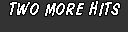
<style>
.page{position:relative;width:128px;height:32px;background:#333333}
.page>*{position:absolute;margin:0}
.t1{font:18px "DomDiagonalBT-Regular";letter-spacing:0.025em;color:#ffffff}
</style>
<div class="page">
<p class="t1" style="left:10px;top:1px;width:110px;height:15px">TWO MORE HITS</p>
</div>
